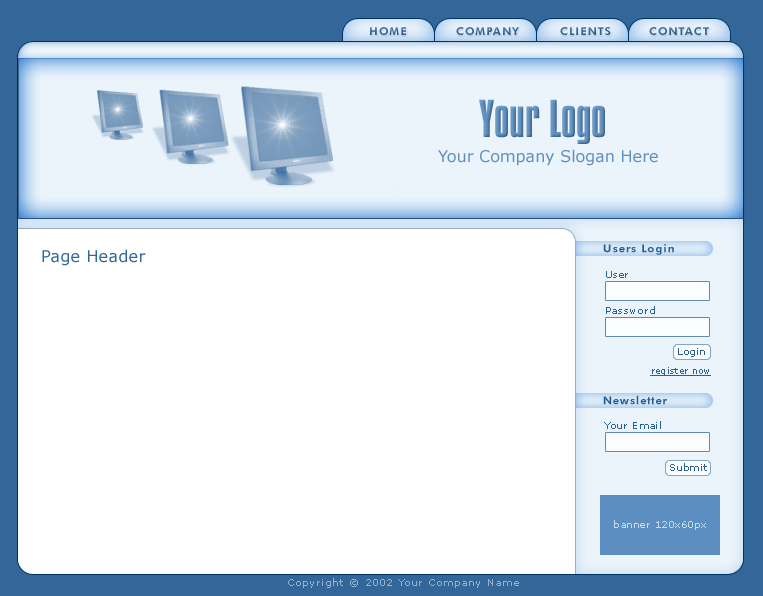
<style>
.page{position:relative;width:763px;height:596px;background:#ffffff}
.page>*{position:absolute;margin:0}
.t1{font:11px "FuturaBT-Heavy";letter-spacing:0.1em;color:#336699;text-transform:uppercase}
.t2{font:46px "CompactaBT-Roman";color:#5e8fbf}
.t3{font:16px "Verdana";color:#5e8fbf}
.t4{font:11px "FuturaBT-Heavy";letter-spacing:0.1em;color:#275f96}
.t5{font:16px "Verdana";color:#336699}
.t6{font:10px "Verdana";letter-spacing:0.05em;color:#275f96}
.t7{font:9px "Verdana";letter-spacing:0.035em;color:#275f96;text-decoration:underline}
.t8{font:10px "Verdana";letter-spacing:0.05em;color:#c5dcf3}
.t9{font:10px "Verdana";letter-spacing:0.1em;color:#99b3cc}
</style>
<div class="page">
<p class="t1" style="left:370px;top:27px;width:36px;height:8px">Home</p>
<p class="t1" style="left:456px;top:27px;width:63px;height:8px">company</p>
<p class="t1" style="left:560px;top:27px;width:51px;height:8px">clients</p>
<p class="t1" style="left:649px;top:27px;width:60px;height:8px">Contact</p>
<p class="t2" style="left:479px;top:99px;width:126px;height:45px">Your Logo</p>
<p class="t3" style="left:438px;top:149px;width:220px;height:17px">Your Company Slogan Here</p>
<p class="t4" style="left:603px;top:244px;width:71px;height:11px">Users Login</p>
<p class="t5" style="left:42px;top:249px;width:104px;height:17px">Page Header</p>
<p class="t6" style="left:606px;top:271px;width:22px;height:7px">User</p>
<p class="t6" style="left:606px;top:306px;width:49px;height:8px">Password</p>
<p class="t6" style="left:678px;top:348px;width:27px;height:9px">Login</p>
<p class="t7" style="left:650px;top:367px;width:61px;height:9px">register now</p>
<p class="t4" style="left:603px;top:395px;width:64px;height:10px">Newsletter</p>
<p class="t6" style="left:604px;top:421px;width:57px;height:8px">Your Email</p>
<p class="t6" style="left:670px;top:463px;width:37px;height:8px">Submit</p>
<p class="t8" style="left:614px;top:520px;width:92px;height:10px">banner 120x60px</p>
<p class="t9" style="left:288px;top:578px;width:231px;height:10px">Copyright © 2002 Your Company Name</p>
</div>
